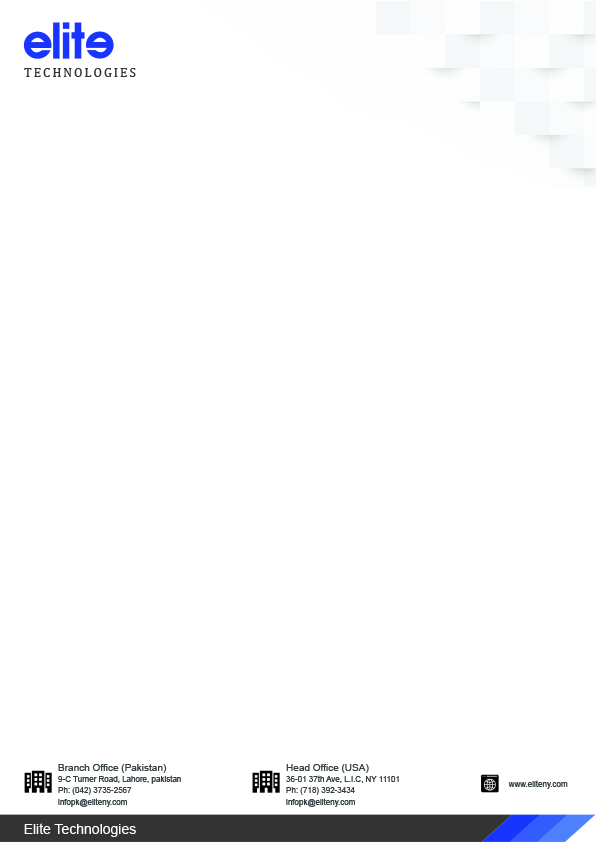
<style>
.page{position:relative;width:596px;height:842px;background:#ffffff}
.page>*{position:absolute;margin:0}
.t1{font:12.9px "Cambria";letter-spacing:0.16em;color:#333333;text-transform:uppercase}
.t2{font:10px "ArialMT";color:#343f41}
.t3{font:8px "ArialMT";color:#343f41}
.t4{font:14px "ArialMT";color:#ffffff}
</style>
<div class="page">
<p class="t1" style="left:24px;top:68px;width:112px;height:9px">Technologies</p>
<p class="t2" style="left:58px;top:764px;width:109px;height:9px">Branch Office (Pakistan)</p>
<p class="t2" style="left:286px;top:764px;width:83px;height:9px">Head Office (USA)</p>
<p class="t3" style="left:58px;top:775px;width:123px;height:9px">9-C Turner Road, Lahore, pakistan</p>
<p class="t3" style="left:286px;top:775px;width:113px;height:8px">36-01 37th Ave, L.I.C, NY 11101</p>
<p class="t3" style="left:508px;top:780px;width:60px;height:9px">www.eliteny.com</p>
<p class="t3" style="left:58px;top:787px;width:74px;height:8px">Ph: (042) 3735-2567</p>
<p class="t3" style="left:58px;top:798px;width:69px;height:9px">infopk@eliteny.com</p>
<p class="t3" style="left:286px;top:787px;width:69px;height:8px">Ph: (718) 392-3434</p>
<p class="t3" style="left:286px;top:798px;width:69px;height:9px">infopk@eliteny.com</p>
<p class="t4" style="left:24px;top:823px;width:112px;height:14px">Elite Technologies</p>
</div>
